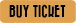
<style>
.page{position:relative;width:76px;height:23px;background:#dfa14e}
.page>*{position:absolute;margin:0}
.t1{font:12.8px "Bazar";color:#000000}
</style>
<div class="page">
<p class="t1" style="left:9px;top:4px;width:57px;height:14px">BUY TICKET</p>
</div>
